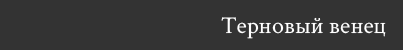
<style>
.page{position:relative;width:403px;height:50px;background:#333333}
.page>*{position:absolute;margin:0}
.t1{font:24px "CrimsonText-Regular";color:#ffffff}
</style>
<div class="page">
<p class="t1" style="left:221px;top:17px;width:165px;height:22px">Терновый венец</p>
</div>
